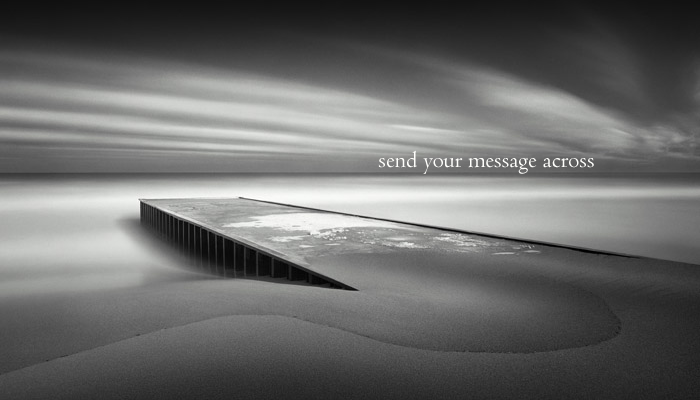
<style>
.page{position:relative;width:700px;height:400px}
.page>*{position:absolute;margin:0}
.t1{font:24px "Centaur";color:#fffffc}
</style>
<div class="page">
<p class="t1" style="left:378px;top:150px;width:216px;height:24px">send your message across</p>
</div>
